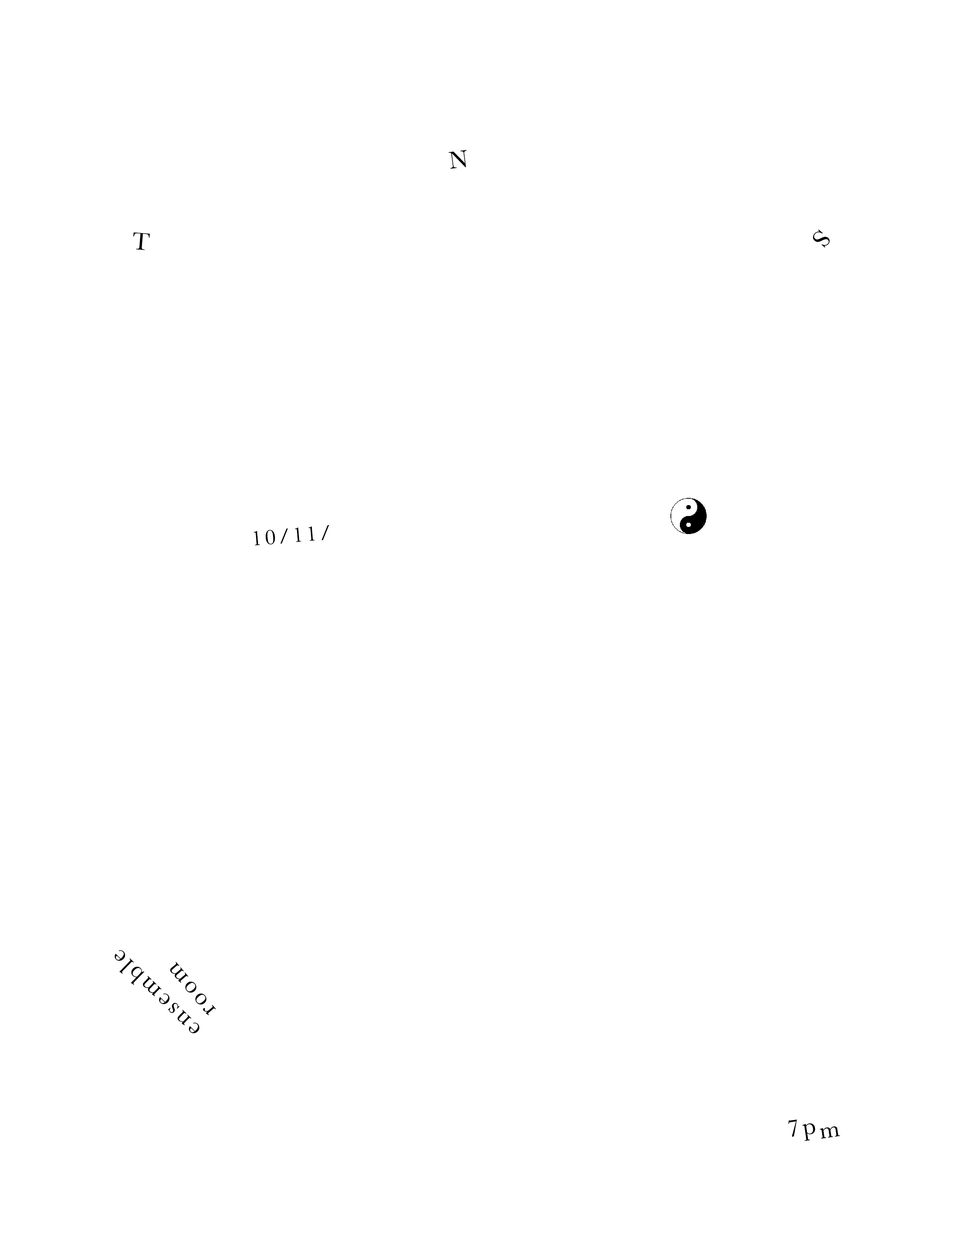
<style>
.page{position:relative;width:960px;height:1242px;background:#ffffff}
.page>*{position:absolute;margin:0}
.t1{font:25.1px "Baskerville";letter-spacing:-0.18em;color:#000000}
.t2{font:21.5px "Baskerville";letter-spacing:0.12em;color:#000000}
.t3{font:25.1px "Baskerville";letter-spacing:0.12em;color:#000000}
.t4{font:24.6px "Baskerville";letter-spacing:0.12em;color:#000000}
</style>
<div class="page">
<p class="t1" style="left:448px;top:150px;width:19px;height:19px;rotate:-7deg">N</p>
<p class="t1" style="left:133px;top:232px;width:17px;height:18px;rotate:5deg">T</p>
<p class="t1" style="left:813px;top:229px;width:17px;height:19px;rotate:131deg">S</p>
<p class="t2" style="left:254px;top:525px;width:75px;height:20px;rotate:-5deg">10/11/</p>
<p class="t3" style="left:114px;top:950px;width:86px;height:84px;rotate:-136deg">ensemble</p>
<p class="t3" style="left:170px;top:962px;width:46px;height:54px;rotate:-130deg">room</p>
<p class="t3" style="left:788px;top:1120px;width:52px;height:21px;rotate:-8deg">7p<span class="t4">m</span></p>
</div>
